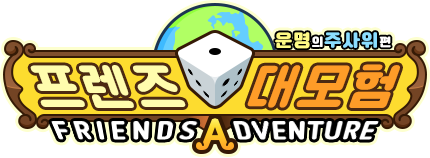
<style>
.page{position:relative;width:430px;height:158px;background:#ffffff}
.page>*{position:absolute;margin:0}
.t1{font:18px "Cafe24SsurroundOTF";letter-spacing:0.05em;color:#8bdeff;font-weight:bold}
.t2{font:18px "Cafe24SsurroundOTF";letter-spacing:0.05em;color:#fffb86;font-weight:bold}
.t3{font:12px "Cafe24SsurroundOTF";letter-spacing:0.05em;color:#ffffff;font-weight:bold}
.t4{font:52px "Cafe24SsurroundOTF";letter-spacing:0.05em;color:#fffcad;font-weight:bold;scale:0.94 1}
.t5{font:52px "Cafe24SsurroundOTF";letter-spacing:0.05em;color:#fe9c28;font-weight:bold;scale:0.94 1}
</style>
<div class="page">
<p class="t1" style="left:275px;top:32px;width:116px;height:17px"><span class="t2">운명</span><span class="t3">의</span>주사위<span class="t3">편</span></p>
<p class="t4" style="left:30px;top:65px;width:156px;height:43px">프렌즈</p>
<p class="t5" style="left:247px;top:64px;width:153px;height:44px">대모험</p>
</div>
